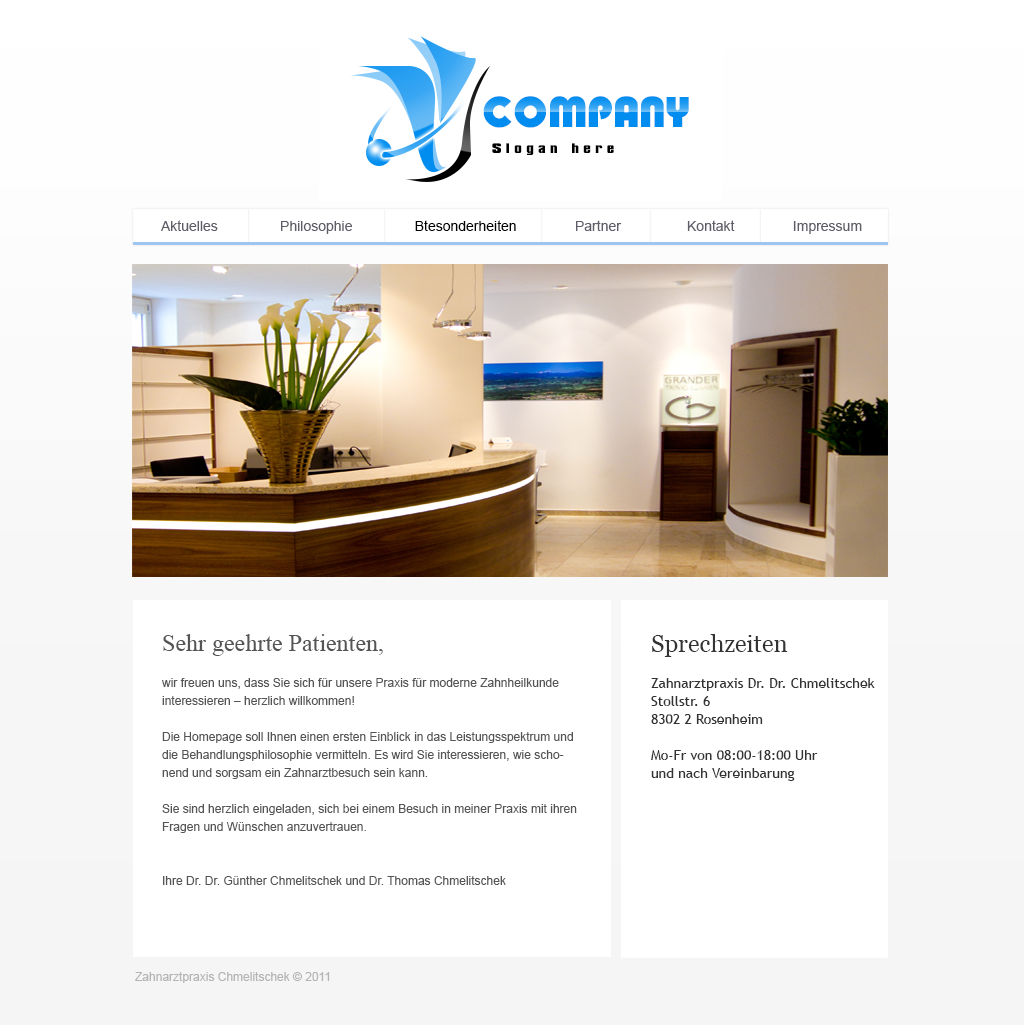
<style>
.page{position:relative;width:1024px;height:1025px;background:#ffffff}
.page>*{position:absolute;margin:0}
.t1{font:14px "ArialMT";color:#5f5d67}
.t2{font:14px "ArialMT";color:#000000}
.t3{font:12px/18px "ArialMT";color:#555555}
.t4{font:24px/18px "TimesNewRomanPSMT";color:#555555}
.t5{font:14px/18px "TrebuchetMS";color:#333333}
.t6{font:24px/18px "Georgia";color:#333333}
.t7{font:12px "ArialMT";color:#b4b3b6}
</style>
<div class="page">
<p class="t1" style="left:161px;top:220px;width:701px;height:14px">Aktuelles                Philosophie                <span class="t2">Btesonderheiten</span>               Partner                 Kontakt               Impressum</p>
<p class="t3" style="left:162px;top:634px;width:415px;height:251px"><span class="t4">Sehr geehrte Patienten,<br></span><br>wir freuen uns, dass Sie sich für unsere Praxis für moderne Zahnheilkunde interessieren – herzlich willkommen!<br><br>Die Homepage soll Ihnen einen ersten Einblick in das Leistungsspektrum und die Behandlungsphilosophie vermitteln. Es wird Sie interessieren, wie schonend und sorgsam ein Zahnarztbesuch sein kann.<br><br>Sie sind herzlich eingeladen, sich bei einem Besuch in meiner Praxis mit ihren Fragen und Wünschen anzuvertrauen.<br><br><br>Ihre Dr. Dr. Günther Chmelitschek und Dr. Thomas Chmelitschek</p>
<p class="t5" style="left:651px;top:634px;width:224px;height:147px"><span class="t6">Sprechzeiten<br><br></span>Zahnarztpraxis Dr. Dr. Chmelitschek<br>Stollstr. 6<br>8302 2 Rosenheim<br><br>Mo-Fr von 08:00-18:00 Uhr <br>und nach Vereinbarung</p>
<p class="t7" style="left:135px;top:972px;width:195px;height:11px">Zahnarztpraxis Chmelitschek © 2011</p>
</div>
